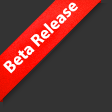
<style>
.page{position:relative;width:112px;height:112px;background:#333333}
.page>*{position:absolute;margin:0}
.t1{font:17px "MyriadPro-Bold";color:#ffffff}
</style>
<div class="page">
<p class="t1" style="left:3px;top:2px;width:75px;height:72px;rotate:-44deg">Beta Release</p>
</div>
